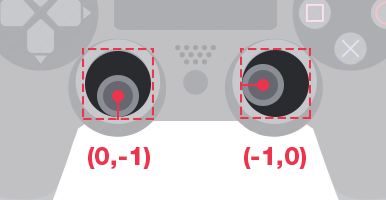
<style>
.page{position:relative;width:386px;height:200px;background:#c1c1c4}
.page>*{position:absolute;margin:0}
.t1{font:25px "HelveticaNeueCyr-Black";color:#ed344c}
</style>
<div class="page">
<p class="t1" style="left:88px;top:147px;width:62px;height:22px">(0,-1)</p>
<p class="t1" style="left:244px;top:147px;width:62px;height:22px">(-1,0)</p>
</div>
